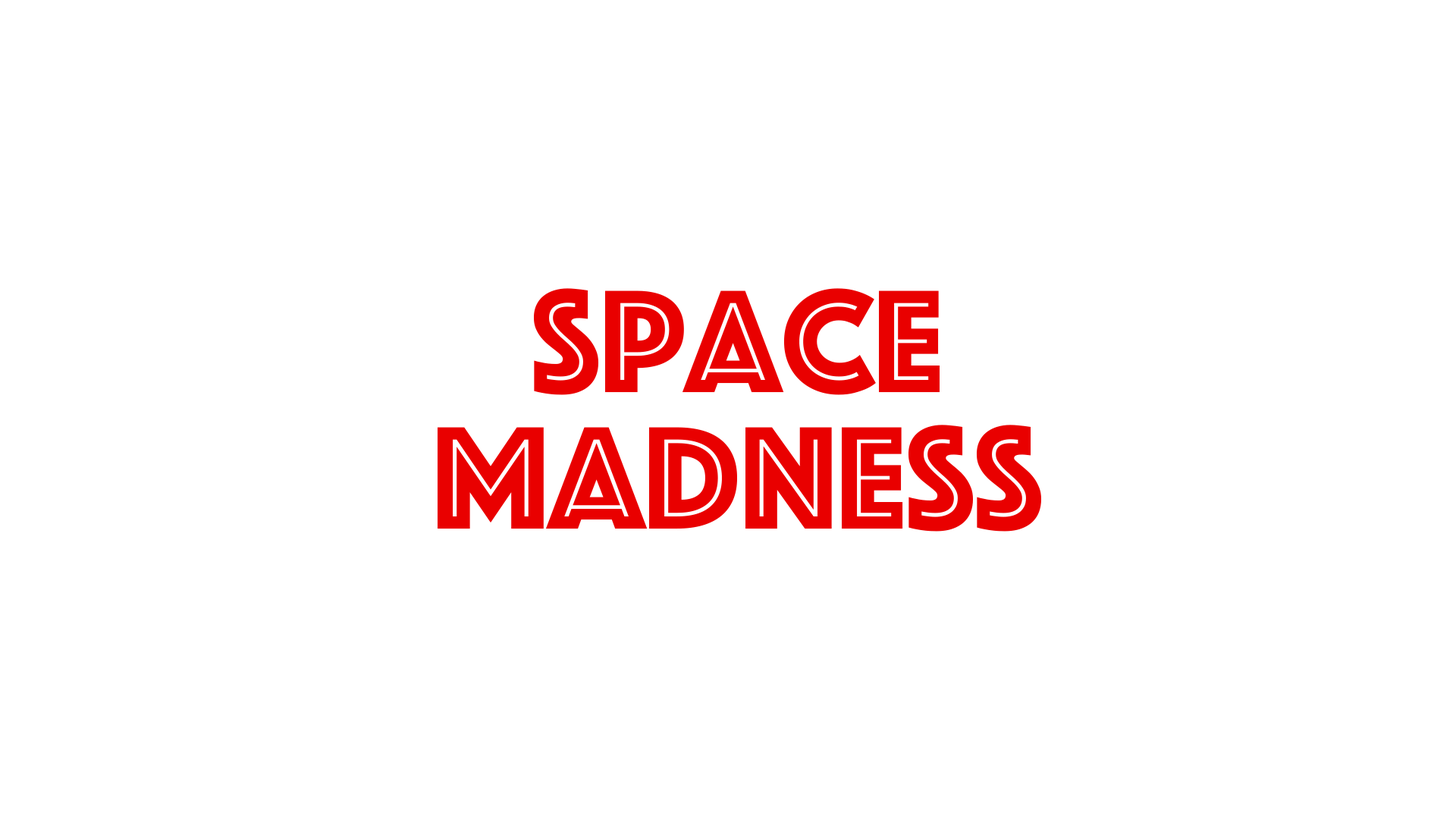
<style>
.page{position:relative;width:1456px;height:819px;background:#ffffff}
.page>*{position:absolute;margin:0}
.t1{font:151.7px/136.5px "Phosphate-Inline";color:#e90000}
</style>
<div class="page">
<p class="t1" style="left:438px;top:288px;width:603px;height:244px;text-align:center">Space<br>Madness</p>
</div>
